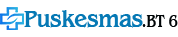
<style>
.page{position:relative;width:178px;height:37px;background:#ffffff}
.page>*{position:absolute;margin:0}
.t1{font:25px "BangleBold";color:#0679b5;scale:0.92 1}
.t2{font:17.9px "BangleBold";color:#000507;scale:0.82 1}
</style>
<div class="page">
<p class="t1" style="left:24px;top:10px;width:119px;height:18px">Puskesmas</p>
<p class="t2" style="left:142px;top:14px;width:36px;height:13px">.BT 6</p>
</div>
